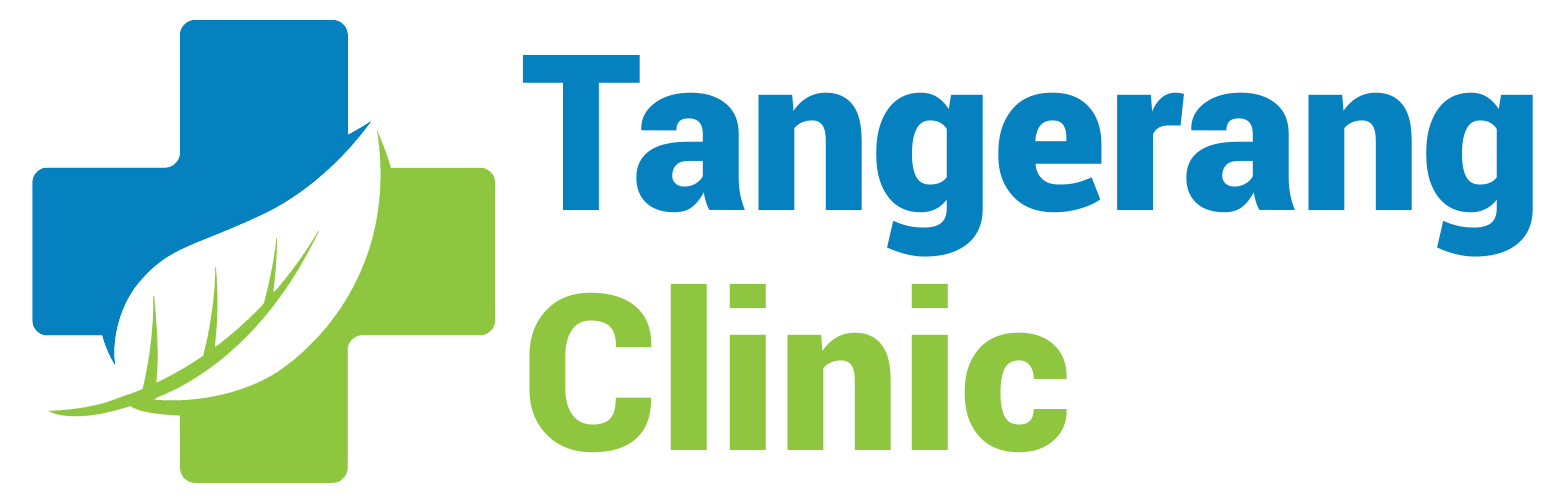
<style>
.page{position:relative;width:1568px;height:500px;background:#ffffff}
.page>*{position:absolute;margin:0}
.t1{font:217.9px/240px "Roboto-Black";color:#0581bf}
.t2{font:217.9px/240px "Roboto-Black";color:#8ec63f}
</style>
<div class="page">
<p class="t1" style="left:522px;top:55px;width:1011px;height:398px">Tangerang<br><span class="t2">Clinic</span></p>
</div>
